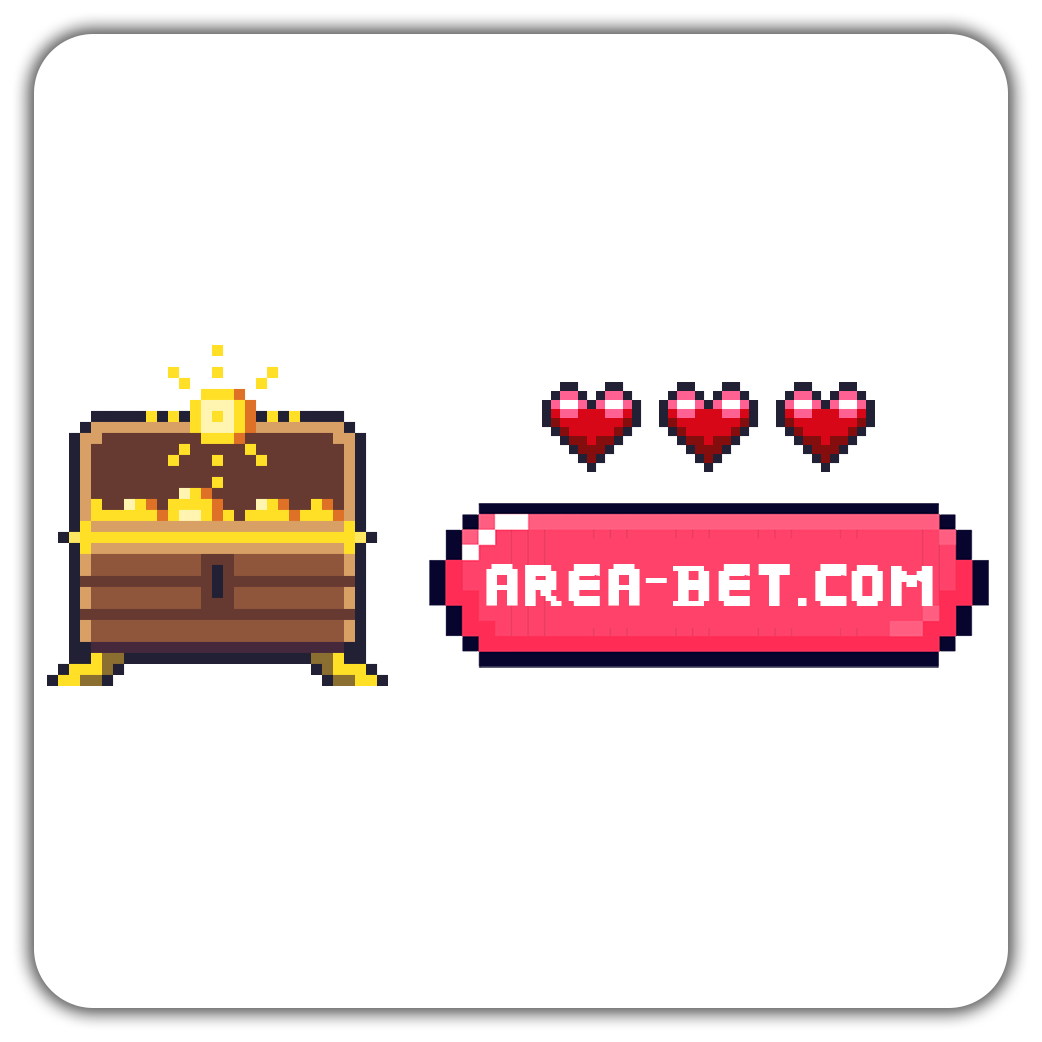
<style>
.page{position:relative;width:1042px;height:1042px;background:#ffffff}
.page>*{position:absolute;margin:0}
.t1{font:58.8px "pixellet-Bold";color:#ffffff}
</style>
<div class="page">
<p class="t1" style="left:486px;top:564px;width:447px;height:42px">AREA-bET.COM</p>
</div>
